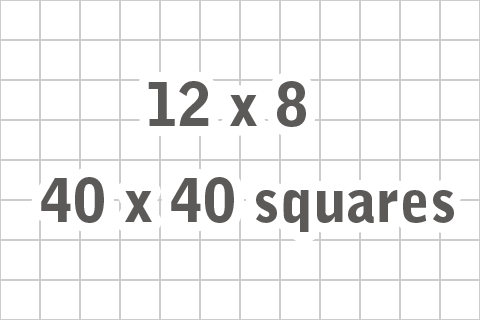
<style>
.page{position:relative;width:480px;height:320px;background:#ffffff}
.page>*{position:absolute;margin:0}
.t1{font:60px "BellGothicStd-Black";color:#5c5959}
</style>
<div class="page">
<p class="t1" style="left:148px;top:81px;width:158px;height:46px">12 x 8</p>
<p class="t1" style="left:41px;top:177px;width:413px;height:55px">40 x 40 squares</p>
</div>
